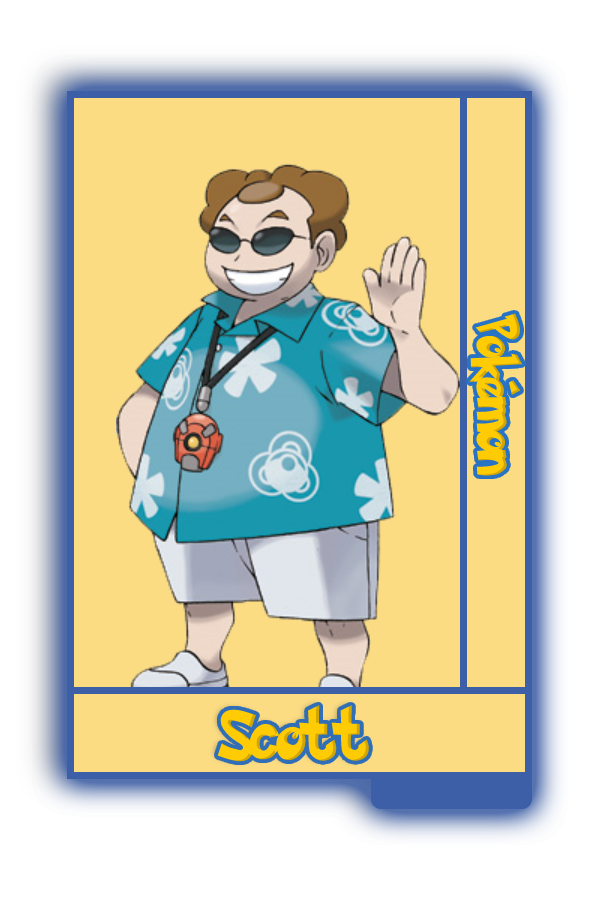
<style>
.page{position:relative;width:600px;height:900px;background:#fbdc83}
.page>*{position:absolute;margin:0}
.t1{font:48.8px "PokemonSolidNormal";color:#ffcb05;scale:0.8 1}
.t2{font:56.6px "PokemonSolidNormal";color:#ffcb05;scale:0.92 1}
</style>
<div class="page">
<p class="t1" style="left:469px;top:313px;width:54px;height:163px;rotate:90deg">Pokémon</p>
<p class="t2" style="left:217px;top:705px;width:152px;height:57px">Scott</p>
</div>
